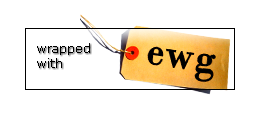
<style>
.page{position:relative;width:256px;height:117px;background:#ffffff}
.page>*{position:absolute;margin:0}
.t1{font:12px "Verdana";color:#000000}
</style>
<div class="page">
<p class="t1" style="left:37px;top:43px;width:53px;height:25px">wrapped<br>with</p>
</div>
